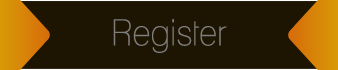
<style>
.page{position:relative;width:338px;height:70px;background:#1d1402}
.page>*{position:absolute;margin:0}
.t1{font:36.2px "Lane-Narrow";color:#7e7e7e;scale:0.95 1}
</style>
<div class="page">
<p class="t1" style="left:113px;top:18px;width:114px;height:35px">Register</p>
</div>
